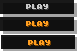
<style>
.page{position:relative;width:77px;height:51px;background:#101010}
.page>*{position:absolute;margin:0}
.t1{font:8px "04b03";color:#c9c9c9;font-weight:bold}
.t2{font:8px "04b03";color:#ff9e20;font-weight:bold}
</style>
<div class="page">
<p class="t1" style="left:26px;top:4px;width:22px;height:5px">PLAY</p>
<p class="t2" style="left:26px;top:21px;width:22px;height:5px">PLAY</p>
<p class="t2" style="left:28px;top:40px;width:22px;height:5px">PLAY</p>
</div>
